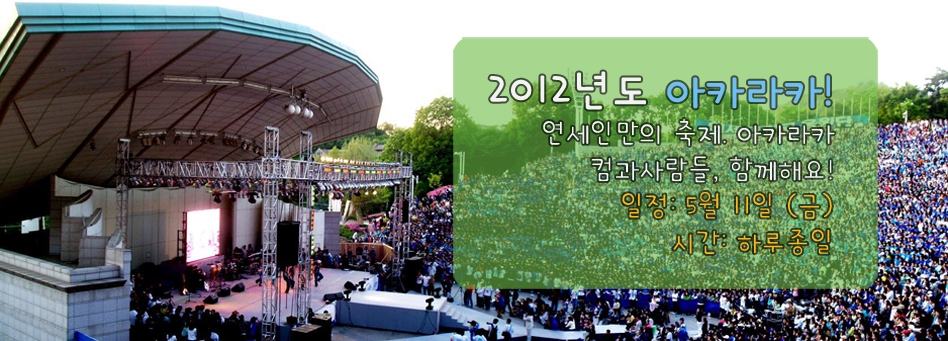
<style>
.page{position:relative;width:948px;height:341px}
.page>*{position:absolute;margin:0}
.t1{font:30.4px "HeummBombi122";color:#f3f3f3}
.t2{font:48.6px "HeummBombi152";color:#f3f3f3}
.t3{font:48.6px "HeummBombi152";color:#6fbff7}
.t4{font:30.4px "HeummBombi122";color:#fdb813}
</style>
<div class="page">
<p class="t1" style="left:489px;top:71px;width:346px;height:184px;text-align:right"><span class="t2">2012년도 </span><span class="t3">아카라카!<br></span>연세인만의 축제. 아카라카<br>컴과사람들, 함께해요!<br><span class="t4">일정: 5월 11일 (금)<br>시간: 하루종일</span></p>
</div>
